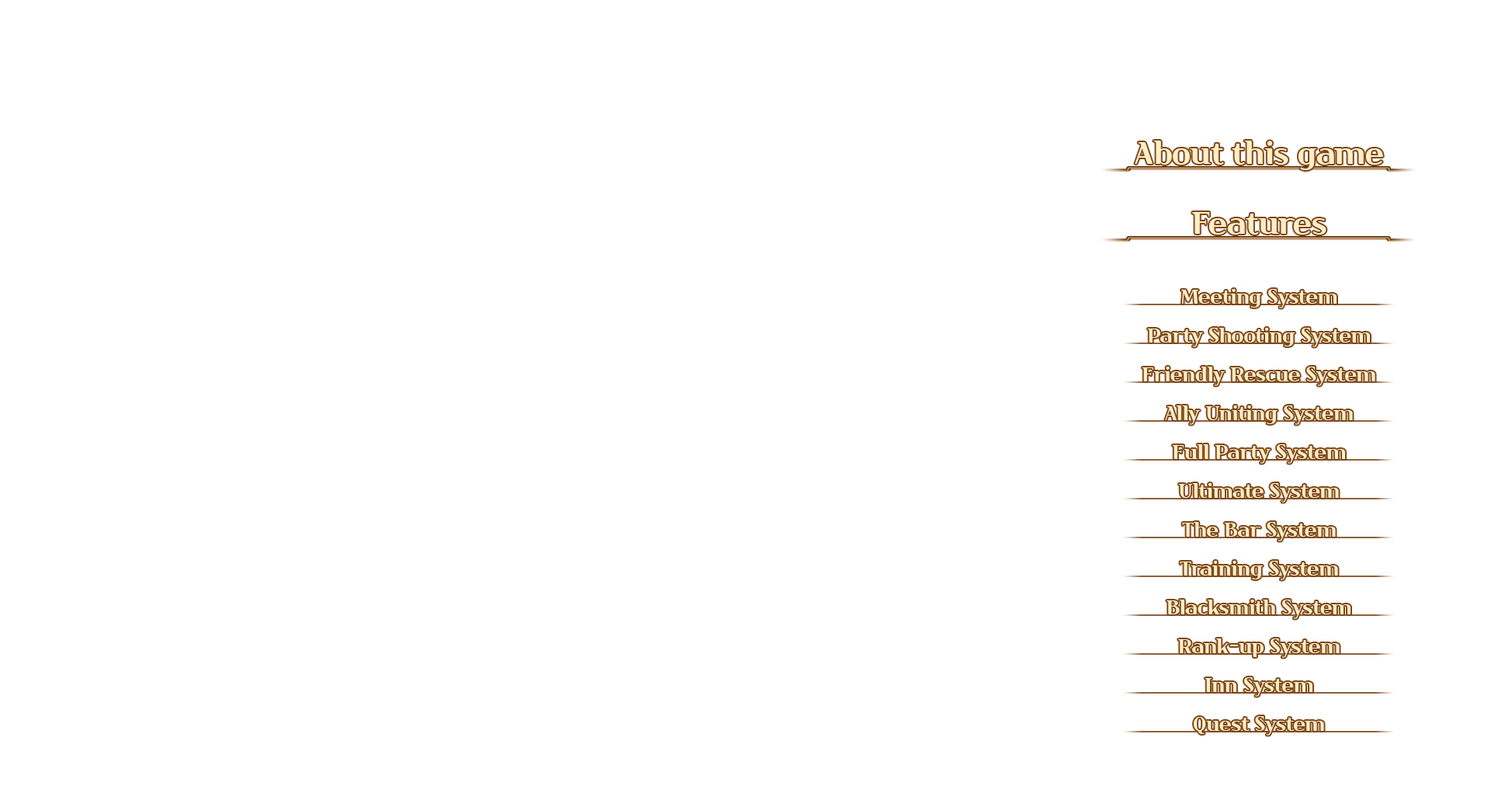
<style>
.page{position:relative;width:1491px;height:800px;background:#ffffff}
.page>*{position:absolute;margin:0}
.t1{font:31.1px "Cafe24Danjunghae";color:#ffeec4}
.t2{font:20.2px "Cafe24Danjunghae";color:#ffeec4}
</style>
<div class="page">
<p class="t1" style="left:1135px;top:141px;width:248px;height:29px">About this game</p>
<p class="t1" style="left:1192px;top:212px;width:135px;height:22px">Features</p>
<p class="t2" style="left:1182px;top:289px;width:155px;height:19px">Meeting System</p>
<p class="t2" style="left:1147px;top:328px;width:223px;height:19px">Party Shooting System</p>
<p class="t2" style="left:1142px;top:366px;width:234px;height:20px">Friendly Rescue System</p>
<p class="t2" style="left:1165px;top:405px;width:188px;height:20px">Ally Uniting System</p>
<p class="t2" style="left:1172px;top:444px;width:173px;height:19px">Full Party System</p>
<p class="t2" style="left:1178px;top:483px;width:161px;height:19px">Ultimate System</p>
<p class="t2" style="left:1182px;top:522px;width:154px;height:19px">The Bar System</p>
<p class="t2" style="left:1180px;top:560px;width:158px;height:20px">Training System</p>
<p class="t2" style="left:1167px;top:599px;width:184px;height:20px">Blacksmith System</p>
<p class="t2" style="left:1178px;top:638px;width:162px;height:20px">Rank-up System</p>
<p class="t2" style="left:1205px;top:677px;width:108px;height:19px">Inn System</p>
<p class="t2" style="left:1194px;top:716px;width:130px;height:19px">Quest System</p>
</div>
